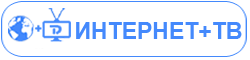
<style>
.page{position:relative;width:250px;height:60px;background:#ffffff}
.page>*{position:absolute;margin:0}
.t1{font:23px "Arial-BoldMT";color:#4489fc}
</style>
<div class="page">
<p class="t1" style="left:76px;top:22px;width:166px;height:17px">ИНТЕРНЕТ+ТВ</p>
</div>
